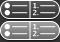
<style>
.page{position:relative;width:60px;height:42px}
.page>*{position:absolute;margin:0}
.t1{font:7px "LucidaGrande";letter-spacing:-0.025em;color:#ffffff}
</style>
<div class="page">
<p class="t1" style="left:33px;top:3px;width:6px;height:6px">1.</p>
<p class="t1" style="left:32px;top:9px;width:7px;height:7px">2.</p>
<p class="t1" style="left:32px;top:30px;width:7px;height:7px">2.</p>
<p class="t1" style="left:33px;top:24px;width:6px;height:6px">1.</p>
</div>
